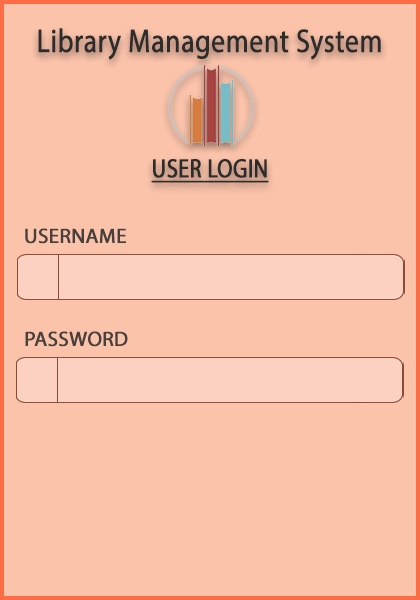
<style>
.page{position:relative;width:420px;height:600px;background:#fbc3aa}
.page>*{position:absolute;margin:0}
.t1{font:33px/25px "MyriadPro-Regular";color:#2c2c2c;font-weight:bold;scale:0.83 1}
.t2{font:26.4px/25px "MyriadPro-Regular";color:#2c2c2c;font-weight:bold;text-decoration:underline;scale:0.83 1}
.t3{font:20.8px "MyriadPro-Regular";color:#48403c;font-weight:bold}
</style>
<div class="page">
<p class="t1" style="left:38px;top:28px;width:343px;height:155px;text-align:center">Library Management System<br><br><br><br><br><span class="t2">USER LOGIN</span></p>
<p class="t3" style="left:25px;top:228px;width:101px;height:16px">USERNAME</p>
<p class="t3" style="left:25px;top:331px;width:103px;height:16px">PASSWORD</p>
</div>
